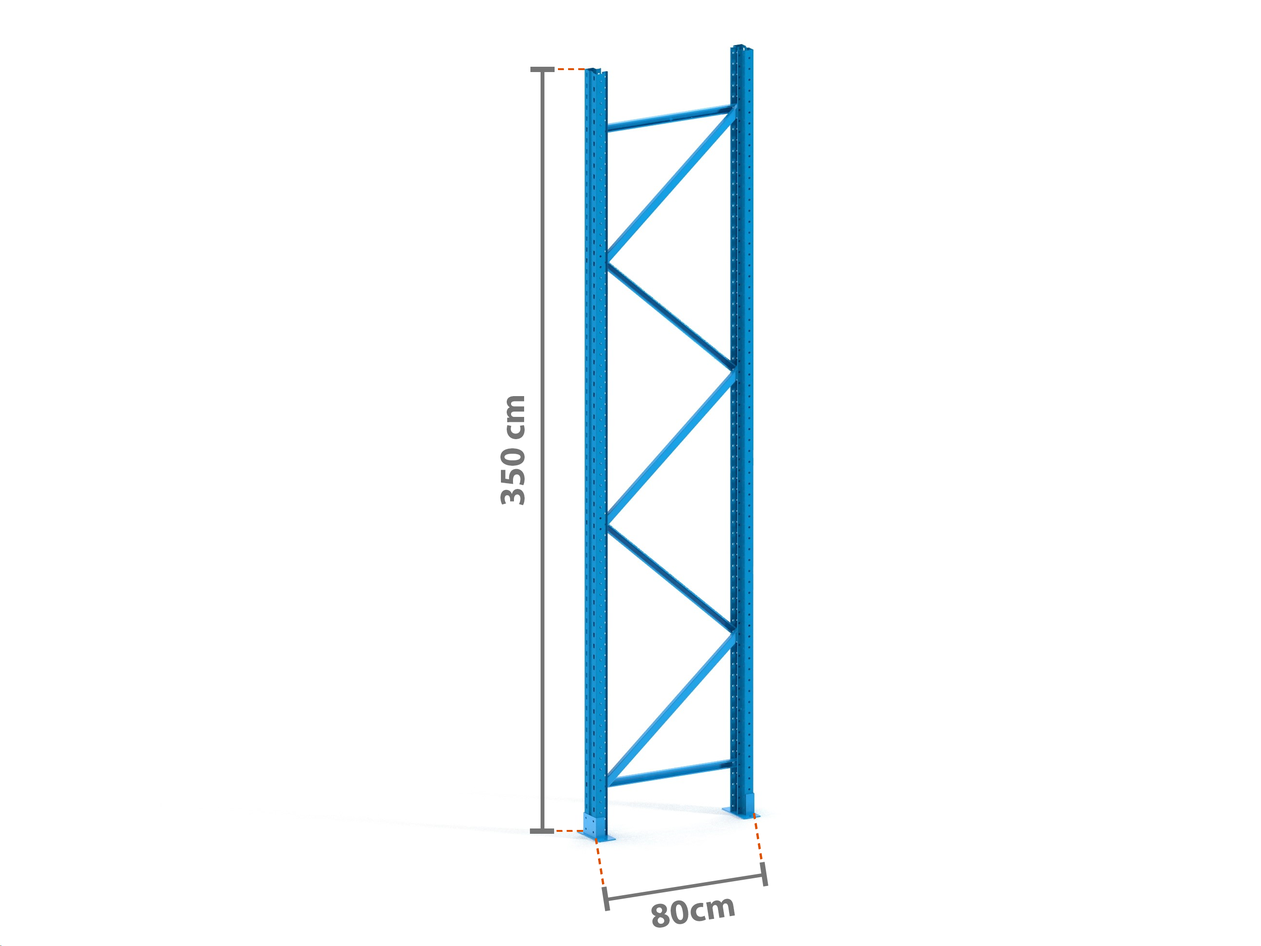
<style>
.page{position:relative;width:1261px;height:946px;background:#ffffff}
.page>*{position:absolute;margin:0}
.t1{font:35.5px "MyriadPro-Bold";color:#757575}
</style>
<div class="page">
<p class="t1" style="left:500px;top:396px;width:25px;height:109px;rotate:-90deg">350 cm</p>
<p class="t1" style="left:651px;top:898px;width:84px;height:29px;rotate:-9deg">80cm</p>
</div>
